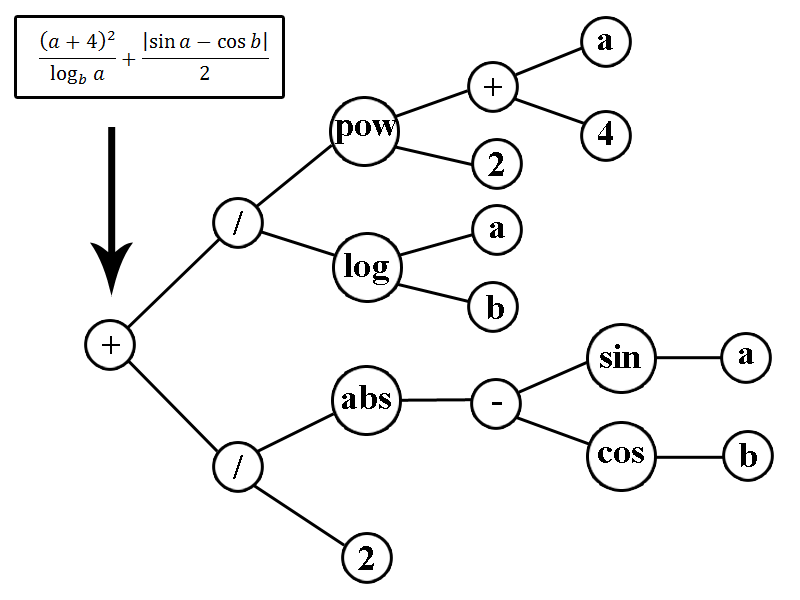
<style>
.page{position:relative;width:800px;height:600px;background:#ffffff}
.page>*{position:absolute;margin:0}
.t1{font:36px "TimesNewRomanPS-BoldMT";color:#000000}
</style>
<div class="page">
<p class="t1" style="left:598px;top:34px;width:15px;height:16px">a</p>
<p class="t1" style="left:484px;top:78px;width:18px;height:18px">+</p>
<p class="t1" style="left:335px;top:120px;width:62px;height:24px">pow</p>
<p class="t1" style="left:598px;top:121px;width:15px;height:24px">4</p>
<p class="t1" style="left:488px;top:152px;width:16px;height:24px">2</p>
<p class="t1" style="left:233px;top:211px;width:10px;height:24px">/</p>
<p class="t1" style="left:490px;top:222px;width:15px;height:16px">a</p>
<p class="t1" style="left:344px;top:253px;width:45px;height:32px">log</p>
<p class="t1" style="left:486px;top:295px;width:18px;height:24px">b</p>
<p class="t1" style="left:102px;top:336px;width:18px;height:18px">+</p>
<p class="t1" style="left:600px;top:344px;width:41px;height:24px">sin</p>
<p class="t1" style="left:739px;top:348px;width:15px;height:16px">a</p>
<p class="t1" style="left:342px;top:385px;width:49px;height:24px">abs</p>
<p class="t1" style="left:598px;top:447px;width:46px;height:16px">cos</p>
<p class="t1" style="left:739px;top:443px;width:18px;height:24px">b</p>
<p class="t1" style="left:233px;top:455px;width:10px;height:24px">/</p>
<p class="t1" style="left:358px;top:546px;width:16px;height:24px">2</p>
</div>
